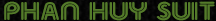
<style>
.page{position:relative;width:216px;height:21px;background:#547b2a}
.page>*{position:absolute;margin:0}
.t1{font:28.8px "VNITubes";color:#547b2a;text-transform:uppercase;scale:1.25 1}
</style>
<div class="page">
<p class="t1" style="left:4px;top:1px;width:211px;height:20px">Phan Huy Suit</p>
</div>
